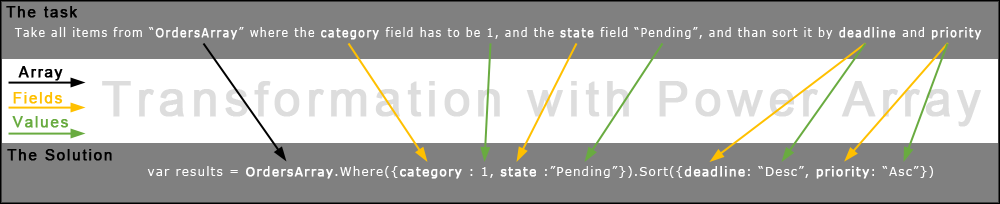
<style>
.page{position:relative;width:1000px;height:204px;background:#808080}
.page>*{position:absolute;margin:0}
.t1{font:15px "ArialMT";letter-spacing:0.1em;color:#000000;font-weight:bold}
.t2{font:11.9px "Verdana";letter-spacing:0.1em;color:#ffffff;scale:0.94 1}
.t3{font:11.9px "Verdana";letter-spacing:0.1em;color:#ffffff;font-weight:bold;scale:0.94 1}
.t4{font:15px "ArialMT";letter-spacing:0.1em;color:#ffc000;font-weight:bold}
.t5{font:47.9px "ArialMT";letter-spacing:0.1em;color:#dddddd;font-weight:bold}
.t6{font:15px "ArialMT";letter-spacing:0.1em;color:#69ab40;font-weight:bold}
.t7{font:11.9px "Verdana";letter-spacing:0.1em;color:#ffffff}
.t8{font:11.9px "Verdana";letter-spacing:0.1em;color:#ffffff;font-weight:bold}
</style>
<div class="page">
<p class="t1" style="left:6px;top:6px;width:71px;height:12px">The task</p>
<p class="t2" style="left:14px;top:27px;width:968px;height:13px">Take all items from “<span class="t3">OrdersArray</span>” where the <span class="t3">category </span>field has to be 1, and the <span class="t3">state </span>field “Pending”, and than sort it by <span class="t3">deadline </span>and <span class="t3">priority</span></p>
<p class="t1" style="left:18px;top:66px;width:45px;height:15px"><span class="t4"> </span>Array</p>
<p class="t5" style="left:102px;top:81px;width:879px;height:46px">Transformation with Power Array</p>
<p class="t4" style="left:13px;top:92px;width:50px;height:12px">Fields</p>
<p class="t6" style="left:12px;top:116px;width:57px;height:12px">Values</p>
<p class="t1" style="left:7px;top:149px;width:105px;height:12px">The Solution</p>
<p class="t7" style="left:147px;top:166px;width:786px;height:13px">var results = <span class="t8">OrdersArray</span>.Where({<span class="t8">category </span>: 1, <span class="t8">state </span>:”Pending”}).Sort({<span class="t8">deadline</span>: “Desc”, <span class="t8">priority</span>: “Asc”})</p>
</div>
